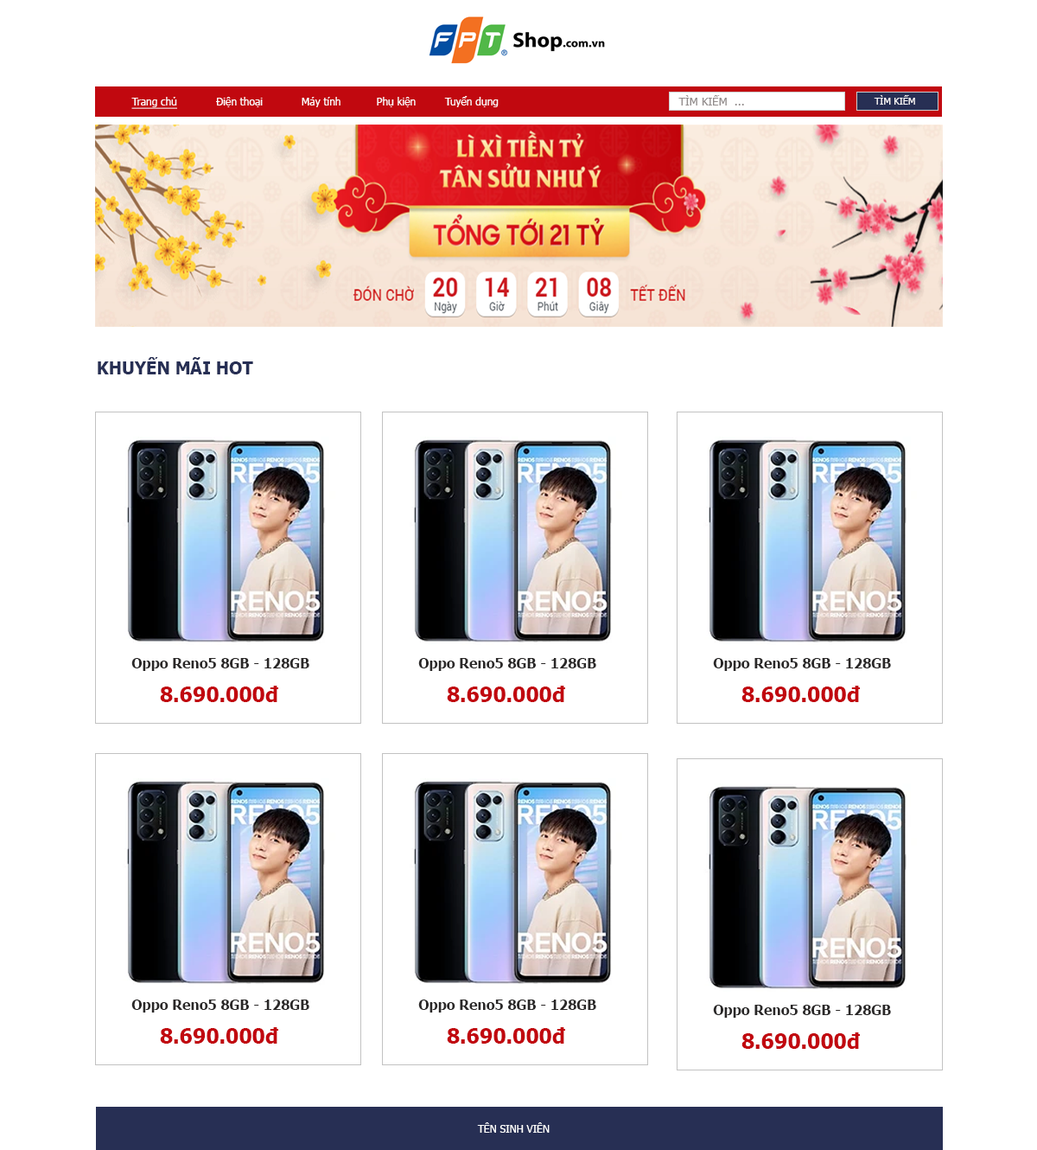
<style>
.page{position:relative;width:1037px;height:1150px;background:#ffffff}
.page>*{position:absolute;margin:0}
.t1{font:10.4px "Tahoma";color:#fefbfb}
.t2{font:10.4px "Tahoma";color:#fefbfb;text-decoration:underline}
.t3{font:11.2px "Tahoma";color:#938d8d}
.t4{font:9.5px "Tahoma";color:#fefbfb}
.t5{font:17.3px "Tahoma-Bold";color:#272f54}
.t6{font:13.8px "Tahoma-Bold";color:#2a2828}
.t7{font:20.7px "Tahoma-Bold";color:#c1080f}
.t8{font:10.4px "Tahoma";color:#ffffff}
</style>
<div class="page">
<p class="t1" style="left:131px;top:96px;width:368px;height:13px"><span class="t2">Trang chủ</span>            Điện thoại            Máy tính           Phụ kiện         Tuyển dụng</p>
<p class="t3" style="left:679px;top:95px;width:65px;height:10px">TÌM KIẾM  ...</p>
<p class="t4" style="left:874px;top:95px;width:41px;height:10px">TÌM KIẾM</p>
<p class="t5" style="left:98px;top:357px;width:155px;height:17px">KHUYẾN MÃI HOT</p>
<p class="t6" style="left:131px;top:658px;width:178px;height:13px">Oppo Reno5 8GB - 128GB</p>
<p class="t6" style="left:418px;top:658px;width:178px;height:13px">Oppo Reno5 8GB - 128GB</p>
<p class="t6" style="left:713px;top:658px;width:178px;height:13px">Oppo Reno5 8GB - 128GB</p>
<p class="t7" style="left:160px;top:685px;width:118px;height:17px">8.690.000đ</p>
<p class="t7" style="left:447px;top:685px;width:118px;height:17px">8.690.000đ</p>
<p class="t7" style="left:742px;top:685px;width:118px;height:17px">8.690.000đ</p>
<p class="t6" style="left:131px;top:999px;width:178px;height:13px">Oppo Reno5 8GB - 128GB</p>
<p class="t6" style="left:418px;top:999px;width:178px;height:13px">Oppo Reno5 8GB - 128GB</p>
<p class="t6" style="left:713px;top:1004px;width:178px;height:13px">Oppo Reno5 8GB - 128GB</p>
<p class="t7" style="left:160px;top:1027px;width:118px;height:16px">8.690.000đ</p>
<p class="t7" style="left:447px;top:1027px;width:118px;height:16px">8.690.000đ</p>
<p class="t7" style="left:742px;top:1032px;width:118px;height:16px">8.690.000đ</p>
<p class="t8" style="left:477px;top:1122px;width:73px;height:10px">TÊN SINH VIÊN</p>
</div>
